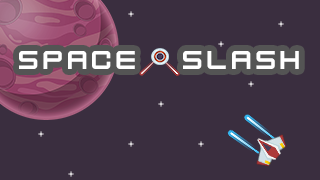
<style>
.page{position:relative;width:320px;height:180px;background:#3a2e3f}
.page>*{position:absolute;margin:0}
.t1{font:29px "KenVector-Future";color:#ffffff}
</style>
<div class="page">
<p class="t1" style="left:19px;top:51px;width:116px;height:18px">Space</p>
<p class="t1" style="left:183px;top:51px;width:116px;height:18px">Slash</p>
</div>
